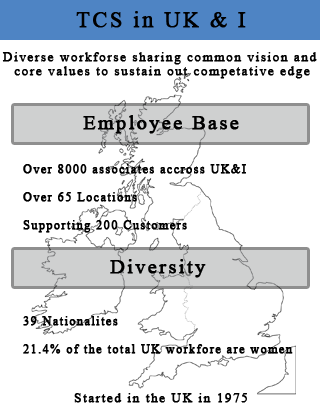
<style>
.page{position:relative;width:320px;height:420px;background:#ffffff}
.page>*{position:absolute;margin:0}
.t1{font:22px "TimesNewRomanPSMT";letter-spacing:0.1em;color:#000000;font-weight:bold}
.t2{font:13px/14px "TimesNewRomanPSMT";letter-spacing:0.1em;color:#000000;font-weight:bold}
.t3{font:20px "TimesNewRomanPSMT";letter-spacing:0.1em;color:#000000;font-weight:bold}
.t4{font:12px/14px "TimesNewRomanPSMT";letter-spacing:0.1em;color:#000000;font-weight:bold}
.t5{font:13px "TimesNewRomanPSMT";letter-spacing:0.1em;color:#000000;font-weight:bold}
</style>
<div class="page">
<p class="t1" style="left:76px;top:11px;width:170px;height:17px">TCS in UK &amp; I</p>
<p class="t2" style="left:2px;top:52px;width:315px;height:27px;text-align:center">Diverse workforse sharing common vision and <br>core values to sustain out competative edge</p>
<p class="t3" style="left:83px;top:115px;width:156px;height:19px">Employee Base</p>
<p class="t4" style="left:23px;top:164px;width:223px;height:69px">Over 8000 associates accross UK&amp;I<br><br>Over 65 Locations<br><br>Supporting 200 Customers</p>
<p class="t3" style="left:110px;top:259px;width:96px;height:19px">Diversity</p>
<p class="t4" style="left:23px;top:316px;width:270px;height:38px">39 Nationalites<br><br>21.4% of the total UK workfore are women</p>
<p class="t5" style="left:74px;top:393px;width:173px;height:10px">Started in the UK in 1975</p>
</div>
